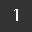
<style>
.page{position:relative;width:32px;height:32px;background:#333333}
.page>*{position:absolute;margin:0}
.t1{font:17.8px "MyriadPro-Regular";color:#ffffff;scale:1.12 1}
</style>
<div class="page">
<p class="t1" style="left:14px;top:9px;width:4px;height:12px">1</p>
</div>
